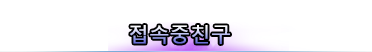
<style>
.page{position:relative;width:372px;height:52px;background:#ffffff}
.page>*{position:absolute;margin:0}
.t1{font:20px "MalgunGothicRegular";font-weight:bold}
</style>
<div class="page">
<p class="t1" style="left:130px;top:25px;width:100px;height:19px">접속중친구</p>
</div>
